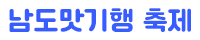
<style>
.page{position:relative;width:200px;height:40px;background:#ffffff}
.page>*{position:absolute;margin:0}
.t1{font:26.6px "Cafe24Ssurround";color:#385dff}
</style>
<div class="page">
<p class="t1" style="left:9px;top:8px;width:182px;height:24px">남도맛기행 축제</p>
</div>
